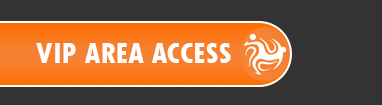
<style>
.page{position:relative;width:382px;height:105px;background:#333333}
.page>*{position:absolute;margin:0}
.t1{font:30px "TwCenMT-CondensedExtraBold";color:#ffffff}
</style>
<div class="page">
<p class="t1" style="left:36px;top:43px;width:195px;height:20px">VIP AREA ACCESS</p>
</div>
